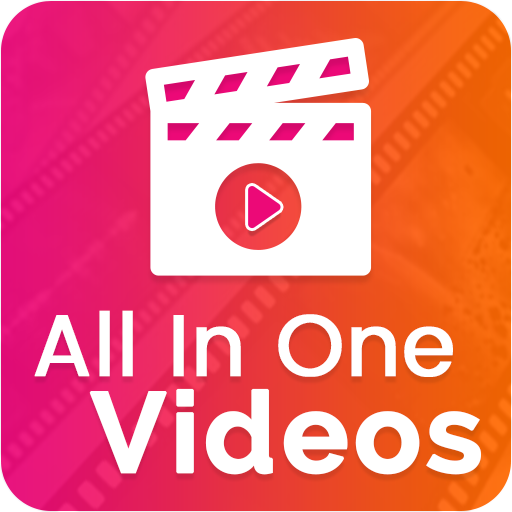
<style>
.page{position:relative;width:512px;height:512px;background:#ffffff}
.page>*{position:absolute;margin:0}
.t1{font:86.6px "Poppins-Regular";color:#ffffff;font-weight:bold}
.t2{font:111.9px "Raleway-Bold";letter-spacing:0.02em;color:#ffffff;font-weight:bold}
</style>
<div class="page">
<p class="t1" style="left:34px;top:310px;width:419px;height:67px">All In One</p>
<p class="t2" style="left:89px;top:388px;width:392px;height:87px">Videos</p>
</div>
